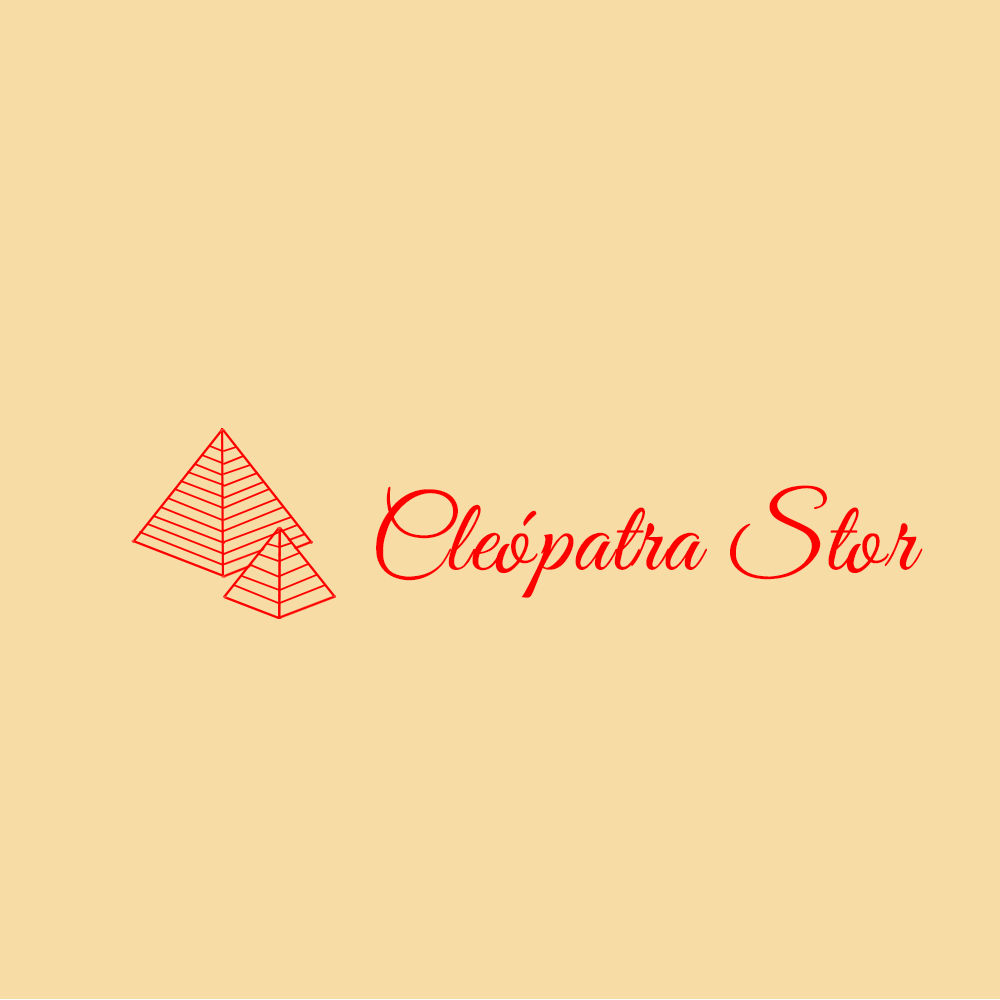
<style>
.page{position:relative;width:1000px;height:1000px;background:#f8dca5}
.page>*{position:absolute;margin:0}
.t1{font:103.3px "GreatVibes-Regular";letter-spacing:0.02em;color:#ff0000}
.t2{font:103.3px "DancingScript-Regular";letter-spacing:0.02em;color:#ff0000}
</style>
<div class="page">
<p class="t1" style="left:376px;top:485px;width:547px;height:113px">Cle<span class="t2">ó</span>patra St<span class="t2">o</span>r</p>
</div>
